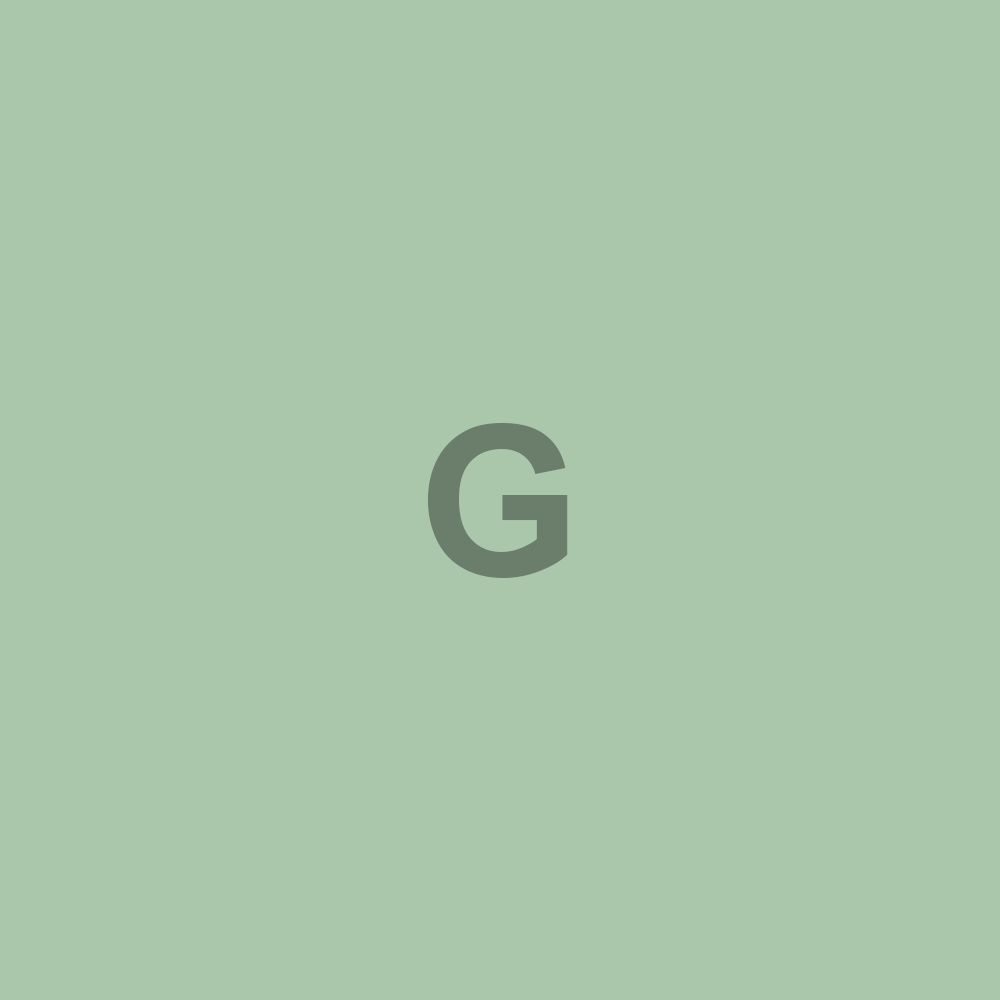
<style>
.page{position:relative;width:1000px;height:1000px;background:#abc7ab}
.page>*{position:absolute;margin:0}
.t1{font:208.3px "Arial-BoldMT";letter-spacing:0.05em;color:#6b7e6b}
</style>
<div class="page">
<p class="t1" style="left:427px;top:423px;width:141px;height:155px">G</p>
</div>
